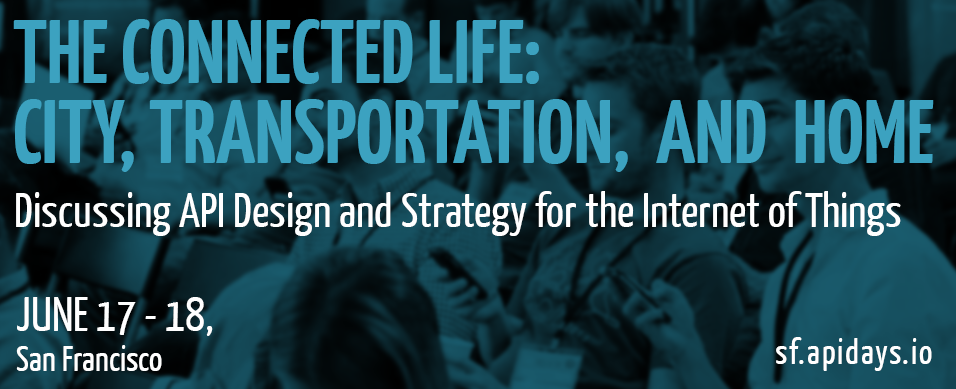
<style>
.page{position:relative;width:956px;height:389px}
.page>*{position:absolute;margin:0}
.t1{font:90px/80px "YanoneKaffeesatz-Bold";color:#3ca2c0}
.t2{font:48px "YanoneKaffeesatz-Regular";color:#ffffff}
.t3{font:48px/40px "YanoneKaffeesatz-Regular";color:#ffffff}
.t4{font:36px/40px "YanoneKaffeesatz-Regular";color:#ffffff}
.t5{font:36px "YanoneKaffeesatz-Regular";letter-spacing:0.05em;color:#ffffff}
</style>
<div class="page">
<p class="t1" style="left:13px;top:19px;width:921px;height:153px">THE CONNECTED LIFE:<br>CITY, TRANSPORTATION,  AND  HOME</p>
<p class="t2" style="left:16px;top:191px;width:885px;height:45px">Discussing API Design and Strategy for the Internet of Things</p>
<p class="t3" style="left:16px;top:297px;width:197px;height:74px">JUNE 17 - 18,<br><span class="t4">San Francisco</span></p>
<p class="t5" style="left:776px;top:337px;width:156px;height:34px">sf.apidays.io</p>
</div>
